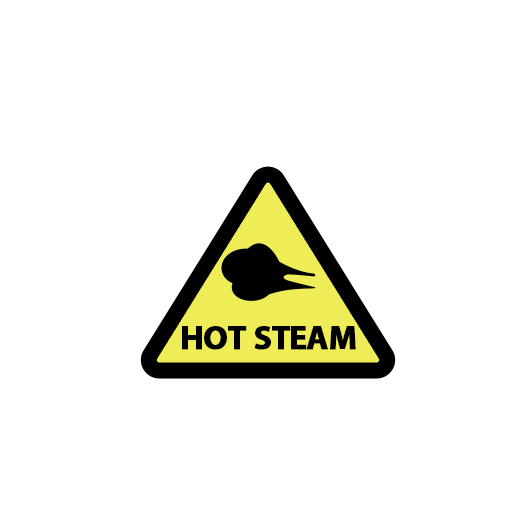
<style>
.page{position:relative;width:512px;height:512px;background:#ffffff}
.page>*{position:absolute;margin:0}
.t1{font:47.7px "MyriadPro-Bold";letter-spacing:-0.04em;color:#000000;font-variant:small-caps;font-weight:bold}
</style>
<div class="page">
<p class="t1" style="left:182px;top:326px;width:174px;height:24px">hot steam</p>
</div>
